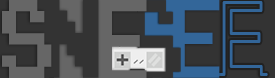
<style>
.page{position:relative;width:275px;height:78px;background:#333333}
.page>*{position:absolute;margin:0}
.t1{font:21.4px "PressStart2P";color:#666666;scale:0.63 1}
.t2{font:21.5px "PressStart2P";color:#333333;scale:0.69 1}
.t3{font:21.6px "PressStart2P";color:#336699;scale:0.61 1}
.t4{font:27.9px "Iamonlinewithu";color:#336699;scale:0.75 1}
</style>
<div class="page">
<p class="t1" style="left:2px;top:0px;width:50px;height:78px">S</p>
<p class="t2" style="left:44px;top:0px;width:55px;height:78px">N</p>
<p class="t3" style="left:171px;top:0px;width:49px;height:78px">E</p>
<p class="t4" style="left:217px;top:1px;width:51px;height:75px">E</p>
</div>
